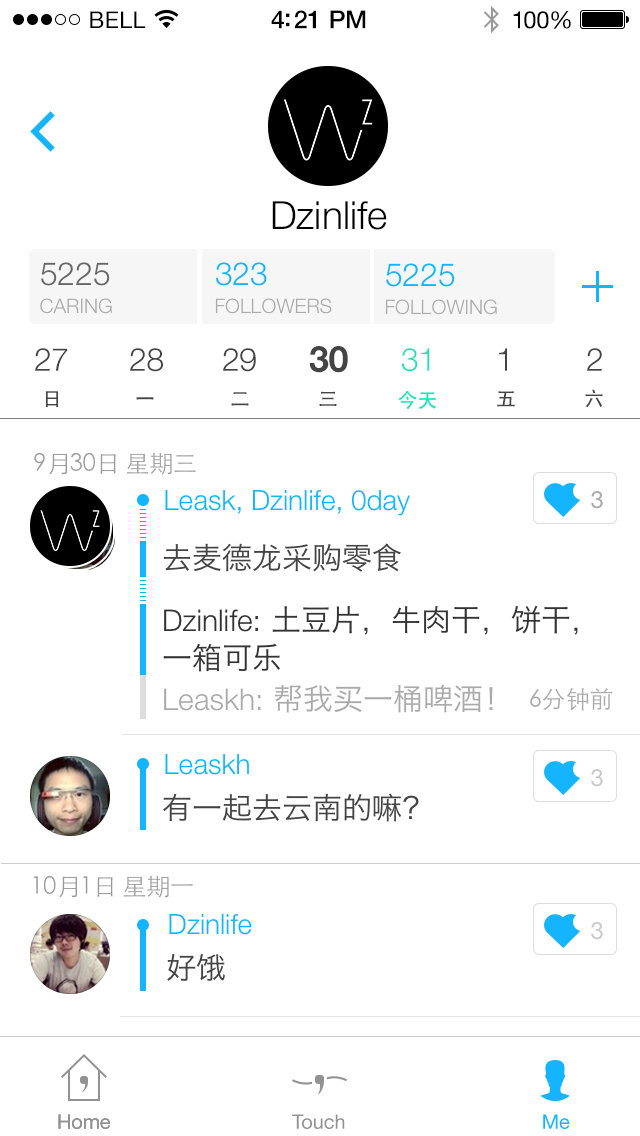
<style>
.page{position:relative;width:640px;height:1136px;background:#ffffff}
.page>*{position:absolute;margin:0}
.t1{font:23px "HelveticaNeue";letter-spacing:0.02em;color:#000000}
.t2{font:25px "HelveticaNeue-Medium";letter-spacing:-0.02em;color:#000000}
.t3{font:24px "HelveticaNeue";letter-spacing:-0.02em;color:#010101}
.t4{font:39px "HelveticaNeue-Light";color:#000000}
.t5{font:20px/28px "HelveticaNeue-Light";color:#aaaaaa;text-transform:uppercase}
.t6{font:32px/28px "HelveticaNeue-Light";color:#666666}
.t7{font:32px/28px "HelveticaNeue-Light";color:#14b4ff}
.t8{font:32px "HelveticaNeue-Light";letter-spacing:-0.01em;color:#444444}
.t9{font:36px "HelveticaNeue-Bold";letter-spacing:-0.01em;color:#444444}
.t10{font:32px "HelveticaNeue-Light";letter-spacing:-0.01em;color:#1de4b7}
.t11{font:20px "STHeitiSC-Medium";letter-spacing:-0.01em;color:#1de4b7}
.t12{font:20px "STHeitiSC-Medium";letter-spacing:-0.01em;color:#444444}
.t13{font:24px "STHeitiSC-Thin";letter-spacing:-0.01em;color:#999999}
.t14{font:28px "HelveticaNeue-Light";color:#14b4ff}
.t15{font:24px "HelveticaNeue";color:#aaaaaa}
.t16{font:30px "HiraginoSansGB-W3";color:#444444}
.t17{font:30px/38px "HiraginoSansGB-W3";color:#333333}
.t18{font:30px/38px "HelveticaNeue-Light";color:#333333}
.t19{font:30px "HiraginoSansGB-W3";color:#aaaaaa}
.t20{font:30px "HelveticaNeue-Light";color:#aaaaaa}
.t21{font:24px "STHeitiSC-Light";color:#aaaaaa}
.t22{font:24px "HelveticaNeue";color:#c9c9c9}
.t23{font:20px "HelveticaNeue";color:#929292}
.t24{font:20px "HelveticaNeue";color:#14b4ff}
</style>
<div class="page">
<p class="t1" style="left:90px;top:11px;width:56px;height:17px">BELL</p>
<p class="t2" style="left:271px;top:10px;width:95px;height:19px">4:21 PM</p>
<p class="t3" style="left:513px;top:11px;width:58px;height:18px">100%</p>
<p class="t4" style="left:272px;top:201px;width:115px;height:29px">Dzinlife</p>
<p class="t5" style="left:40px;top:262px;width:72px;height:52px"><span class="t6">5225<br></span>Caring</p>
<p class="t5" style="left:215px;top:262px;width:117px;height:52px"><span class="t7">323<br></span>Followers</p>
<p class="t5" style="left:385px;top:263px;width:112px;height:52px"><span class="t7">5225<br></span>Following</p>
<p class="t8" style="left:35px;top:348px;width:33px;height:23px">27</p>
<p class="t8" style="left:130px;top:348px;width:33px;height:24px">28</p>
<p class="t8" style="left:223px;top:348px;width:33px;height:24px">29</p>
<p class="t9" style="left:309px;top:346px;width:39px;height:27px">30</p>
<p class="t10" style="left:402px;top:348px;width:28px;height:24px">31</p>
<p class="t8" style="left:499px;top:348px;width:8px;height:23px">1</p>
<p class="t8" style="left:587px;top:348px;width:15px;height:23px">2</p>
<p class="t11" style="left:398px;top:390px;width:39px;height:19px">今天</p>
<p class="t12" style="left:585px;top:389px;width:18px;height:19px">六</p>
<p class="t12" style="left:45px;top:391px;width:14px;height:16px">日</p>
<p class="t12" style="left:136px;top:397px;width:18px;height:3px">一</p>
<p class="t12" style="left:231px;top:392px;width:18px;height:14px">二</p>
<p class="t12" style="left:319px;top:391px;width:18px;height:15px">三</p>
<p class="t12" style="left:497px;top:391px;width:18px;height:16px">五</p>
<p class="t13" style="left:34px;top:452px;width:162px;height:23px">9月30日 星期三</p>
<p class="t14" style="left:165px;top:490px;width:245px;height:26px">Leask, Dzinlife, 0day</p>
<p class="t15" style="left:591px;top:491px;width:12px;height:18px">3</p>
<p class="t16" style="left:163px;top:543px;width:238px;height:29px">去麦德龙采购零食</p>
<p class="t17" style="left:163px;top:605px;width:415px;height:67px"><span class="t18">Dzinlife: </span>土豆片，牛肉干，饼干，一箱可乐</p>
<p class="t19" style="left:164px;top:684px;width:329px;height:29px"><span class="t20">Leaskh: </span>帮我买一桶啤酒！</p>
<p class="t21" style="left:530px;top:688px;width:83px;height:23px">6分钟前</p>
<p class="t14" style="left:165px;top:754px;width:84px;height:21px">Leaskh</p>
<p class="t22" style="left:591px;top:769px;width:12px;height:18px">3</p>
<p class="t16" style="left:163px;top:793px;width:256px;height:29px">有一起去云南的嘛？</p>
<p class="t13" style="left:33px;top:875px;width:160px;height:23px">10月1日 星期一</p>
<p class="t14" style="left:169px;top:914px;width:83px;height:21px">Dzinlife</p>
<p class="t22" style="left:591px;top:922px;width:12px;height:18px">3</p>
<p class="t16" style="left:167px;top:954px;width:58px;height:27px">好饿</p>
<p class="t23" style="left:58px;top:1114px;width:52px;height:15px">Home</p>
<p class="t23" style="left:58px;top:1114px;width:52px;height:15px">Home</p>
<p class="t23" style="left:292px;top:1114px;width:53px;height:15px">Touch</p>
<p class="t24" style="left:543px;top:1114px;width:27px;height:15px">Me</p>
</div>
